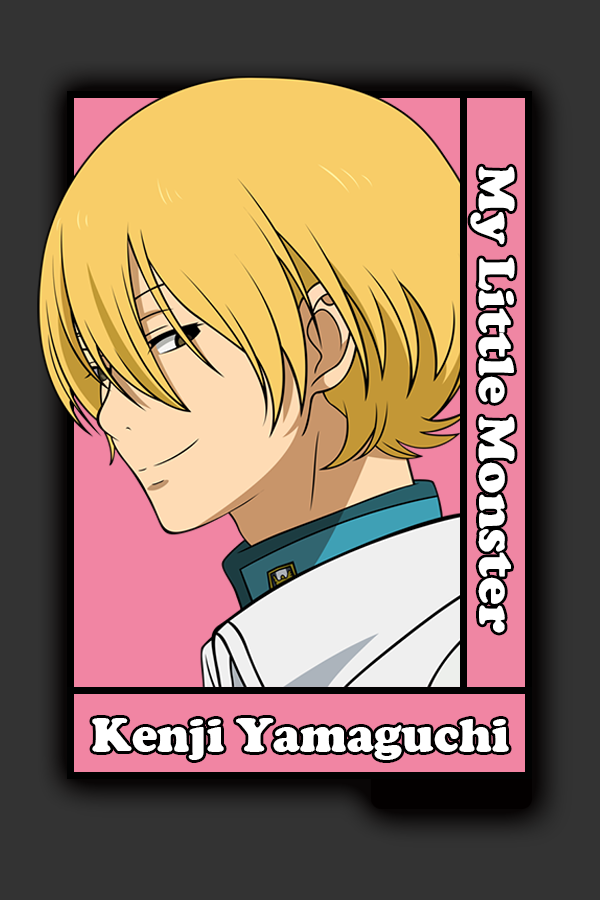
<style>
.page{position:relative;width:600px;height:900px;background:#333333}
.page>*{position:absolute;margin:0}
.t1{font:52px "CooperBlack";color:#ffffff}
.t2{font:47.9px "CooperBlack";color:#ffffff}
</style>
<div class="page">
<p class="t1" style="left:470px;top:166px;width:45px;height:467px;rotate:90deg">My Little Monster</p>
<p class="t2" style="left:92px;top:718px;width:417px;height:42px">Kenji Yamaguchi</p>
</div>
